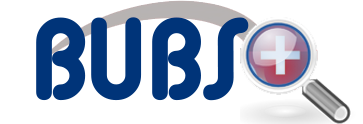
<style>
.page{position:relative;width:363px;height:124px;background:#ffffff}
.page>*{position:absolute;margin:0}
.t1{font:115.5px "Alba";color:#003479}
.t2{font:115.6px "Alba";color:#003479}
</style>
<div class="page">
<p class="t1" style="left:36px;top:17px;width:50px;height:84px">B</p>
<p class="t1" style="left:91px;top:17px;width:51px;height:84px">U</p>
<p class="t2" style="left:152px;top:17px;width:49px;height:84px">B</p>
<p class="t2" style="left:203px;top:17px;width:46px;height:84px">S</p>
</div>
